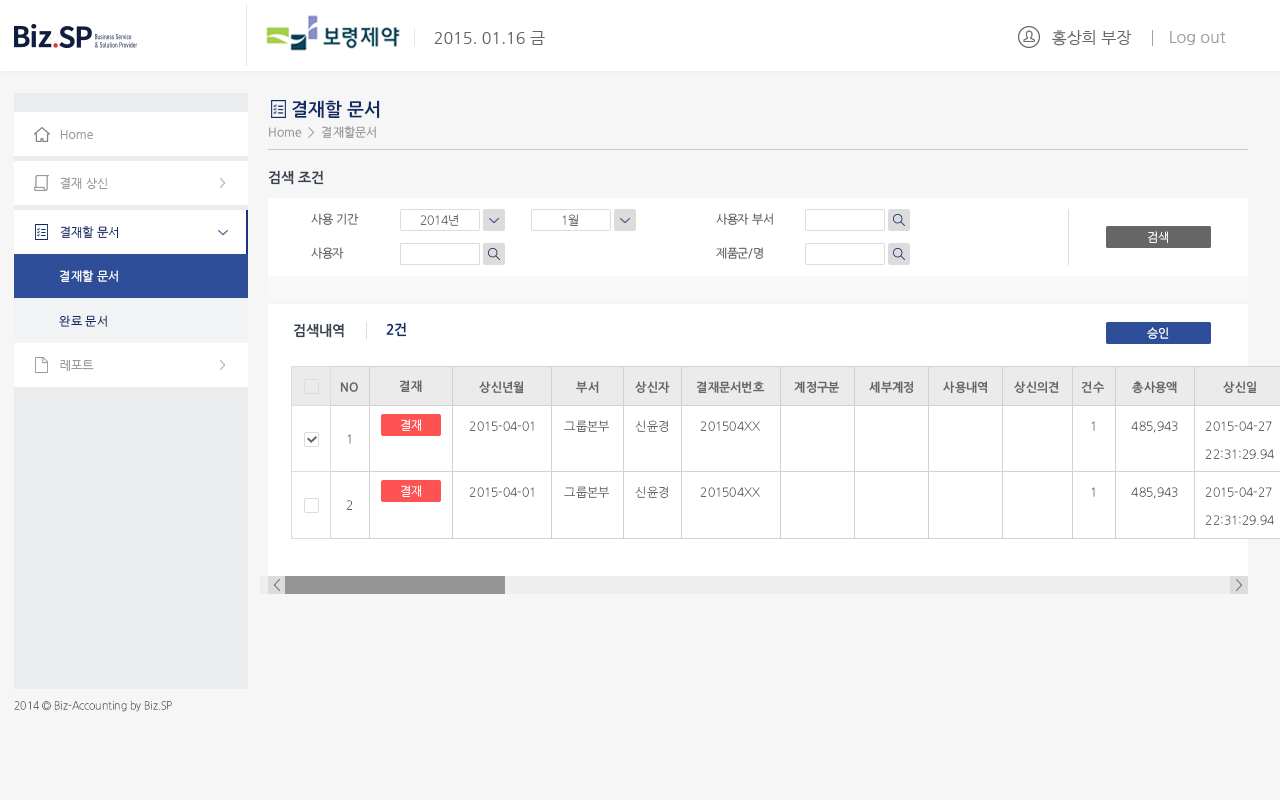
<style>
.page{position:relative;width:1280px;height:800px;background:#ffffff}
.page>*{position:absolute;margin:0}
.t1{font:16px "NanumGothic";color:#666666}
.t2{font:16px "NanumGothic";color:#a0a0a0}
.t3{font:18px "NanumGothicOTFBold";color:#122b66}
.t4{font:12px "NanumGothicOTF";color:#999999}
.t5{font:12px "NanumGothic";color:#999999}
.t6{font:14px "NanumGothicOTFBold";color:#38424e}
.t7{font:12px "NanumGothicOTF";letter-spacing:-0.025em;color:#666666}
.t8{font:12px "NanumGothicOTFLight";letter-spacing:-0.025em;color:#666666}
.t9{font:12px "NanumGothic";color:#122b66}
.t10{font:12px "NanumGothicOTFLight";letter-spacing:-0.025em;color:#ffffff}
.t11{font:12px "NanumGothicOTF";color:#ffffff}
.t12{font:12px "NanumGothicOTF";color:#122b66}
.t13{font:14px "NanumGothicOTFBold";color:#122b66}
.t14{font:12px "NanumGothicOTF";letter-spacing:-0.025em;color:#ffffff}
.t15{font:12px "NanumGothicOTFBold";color:#666666}
.t16{font:12px "NanumGothicOTFLight";color:#666666}
.t17{font:12px/28.1px "NanumGothicOTFLight";color:#666666}
.t18{font:11px "NanumGothicOTFLight";color:#6c6d6d;scale:0.94 1}
</style>
<div class="page">
<p class="t1" style="left:1052px;top:30px;width:80px;height:16px">홍상희 부장</p>
<p class="t1" style="left:434px;top:31px;width:111px;height:14px">2015. 01.16 금</p>
<p class="t2" style="left:1170px;top:31px;width:56px;height:14px">Log out</p>
<p class="t3" style="left:292px;top:100px;width:88px;height:18px">결재할 문서</p>
<p class="t4" style="left:269px;top:126px;width:107px;height:12px">Home  &gt;  결재할문서</p>
<p class="t5" style="left:60px;top:130px;width:33px;height:9px">Home</p>
<p class="t6" style="left:269px;top:170px;width:55px;height:15px">검색 조건</p>
<p class="t5" style="left:60px;top:177px;width:48px;height:12px">결제 상신</p>
<p class="t5" style="left:60px;top:177px;width:48px;height:12px">결재 상신</p>
<p class="t7" style="left:311px;top:213px;width:48px;height:12px">사용 기간</p>
<p class="t8" style="left:420px;top:214px;width:39px;height:12px">2014년</p>
<p class="t8" style="left:562px;top:214px;width:16px;height:12px">1월</p>
<p class="t7" style="left:716px;top:213px;width:57px;height:12px">사용자 부서</p>
<p class="t9" style="left:60px;top:226px;width:58px;height:12px">결재할 문서</p>
<p class="t10" style="left:1148px;top:231px;width:20px;height:12px">검색</p>
<p class="t10" style="left:1148px;top:231px;width:20px;height:12px">검색</p>
<p class="t7" style="left:311px;top:247px;width:33px;height:12px">사용자</p>
<p class="t7" style="left:716px;top:247px;width:47px;height:12px">제품군/명</p>
<p class="t11" style="left:60px;top:270px;width:58px;height:12px">결재할 문서</p>
<p class="t12" style="left:59px;top:315px;width:48px;height:12px">완료 문서</p>
<p class="t6" style="left:294px;top:323px;width:50px;height:15px">검색내역</p>
<p class="t13" style="left:386px;top:322px;width:21px;height:15px">2건</p>
<p class="t14" style="left:1147px;top:327px;width:22px;height:12px">승인</p>
<p class="t5" style="left:60px;top:360px;width:34px;height:11px">레포트</p>
<p class="t5" style="left:60px;top:360px;width:34px;height:11px">레포트</p>
<p class="t15" style="left:340px;top:382px;width:18px;height:10px">NO</p>
<p class="t15" style="left:399px;top:380px;width:23px;height:12px">결재</p>
<p class="t15" style="left:479px;top:381px;width:45px;height:13px">상신년월</p>
<p class="t15" style="left:576px;top:381px;width:23px;height:12px">부서</p>
<p class="t15" style="left:635px;top:381px;width:35px;height:12px">상신자</p>
<p class="t15" style="left:696px;top:381px;width:69px;height:12px">결재문서번호</p>
<p class="t15" style="left:794px;top:381px;width:46px;height:12px">계정구분</p>
<p class="t15" style="left:869px;top:381px;width:45px;height:12px">세부계정</p>
<p class="t15" style="left:943px;top:381px;width:44px;height:12px">사용내역</p>
<p class="t15" style="left:1014px;top:381px;width:45px;height:12px">상신의견</p>
<p class="t15" style="left:1081px;top:381px;width:24px;height:12px">건수</p>
<p class="t15" style="left:1132px;top:381px;width:45px;height:13px">총사용액</p>
<p class="t15" style="left:1223px;top:381px;width:34px;height:12px">상신일</p>
<p class="t10" style="left:401px;top:419px;width:20px;height:12px">결재</p>
<p class="t16" style="left:469px;top:421px;width:65px;height:10px">2015-04-01</p>
<p class="t16" style="left:469px;top:421px;width:65px;height:10px">2015-04-01</p>
<p class="t16" style="left:564px;top:420px;width:45px;height:12px">그룹본부</p>
<p class="t16" style="left:635px;top:420px;width:33px;height:12px">신윤경</p>
<p class="t16" style="left:700px;top:421px;width:60px;height:10px">201504XX</p>
<p class="t16" style="left:1091px;top:421px;width:4px;height:10px">1</p>
<p class="t16" style="left:1131px;top:421px;width:47px;height:12px">485,943</p>
<p class="t17" style="left:1205px;top:421px;width:69px;height:38px">2015-04-27<br>22:31:29.94</p>
<p class="t16" style="left:347px;top:434px;width:4px;height:10px">1</p>
<p class="t10" style="left:401px;top:485px;width:20px;height:12px">결재</p>
<p class="t16" style="left:564px;top:486px;width:45px;height:12px">그룹본부</p>
<p class="t16" style="left:635px;top:486px;width:33px;height:12px">신윤경</p>
<p class="t16" style="left:469px;top:487px;width:65px;height:10px">2015-04-01</p>
<p class="t16" style="left:469px;top:487px;width:65px;height:10px">2015-04-01</p>
<p class="t16" style="left:700px;top:487px;width:60px;height:10px">201504XX</p>
<p class="t16" style="left:1091px;top:487px;width:4px;height:10px">1</p>
<p class="t16" style="left:1131px;top:487px;width:47px;height:12px">485,943</p>
<p class="t17" style="left:1205px;top:487px;width:69px;height:38px">2015-04-27<br>22:31:29.94</p>
<p class="t16" style="left:346px;top:500px;width:7px;height:10px">2</p>
<p class="t18" style="left:14px;top:700px;width:158px;height:12px">2014 © Biz-Accounting by Biz.SP</p>
</div>
